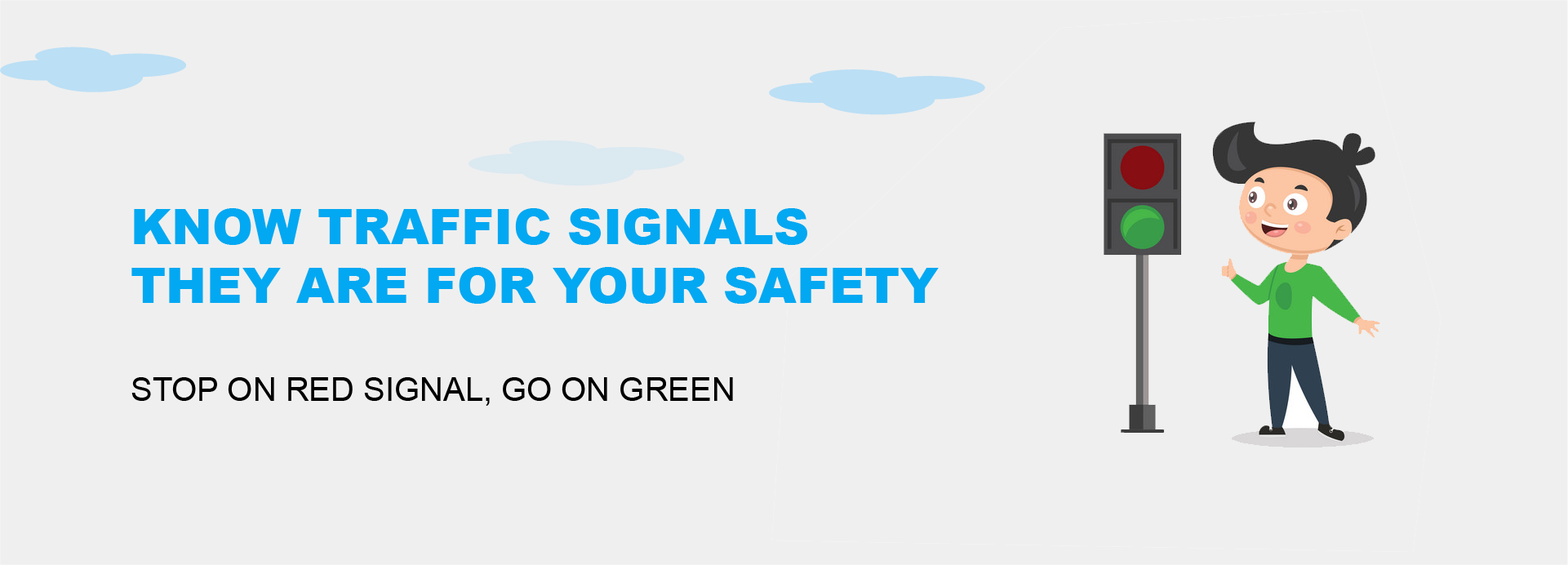
<style>
.page{position:relative;width:1568px;height:565px;background:#efefef}
.page>*{position:absolute;margin:0}
.t1{font:49px "Arial-Black";color:#02a8f2}
.t2{font:32.6px "ArialMT";color:#000000}
</style>
<div class="page">
<p class="t1" style="left:131px;top:208px;width:808px;height:96px">KNOW TRAFFIC SIGNALS <br>THEY ARE FOR YOUR SAFETY</p>
<p class="t2" style="left:131px;top:377px;width:602px;height:29px">STOP ON RED SIGNAL, GO ON GREEN</p>
</div>
